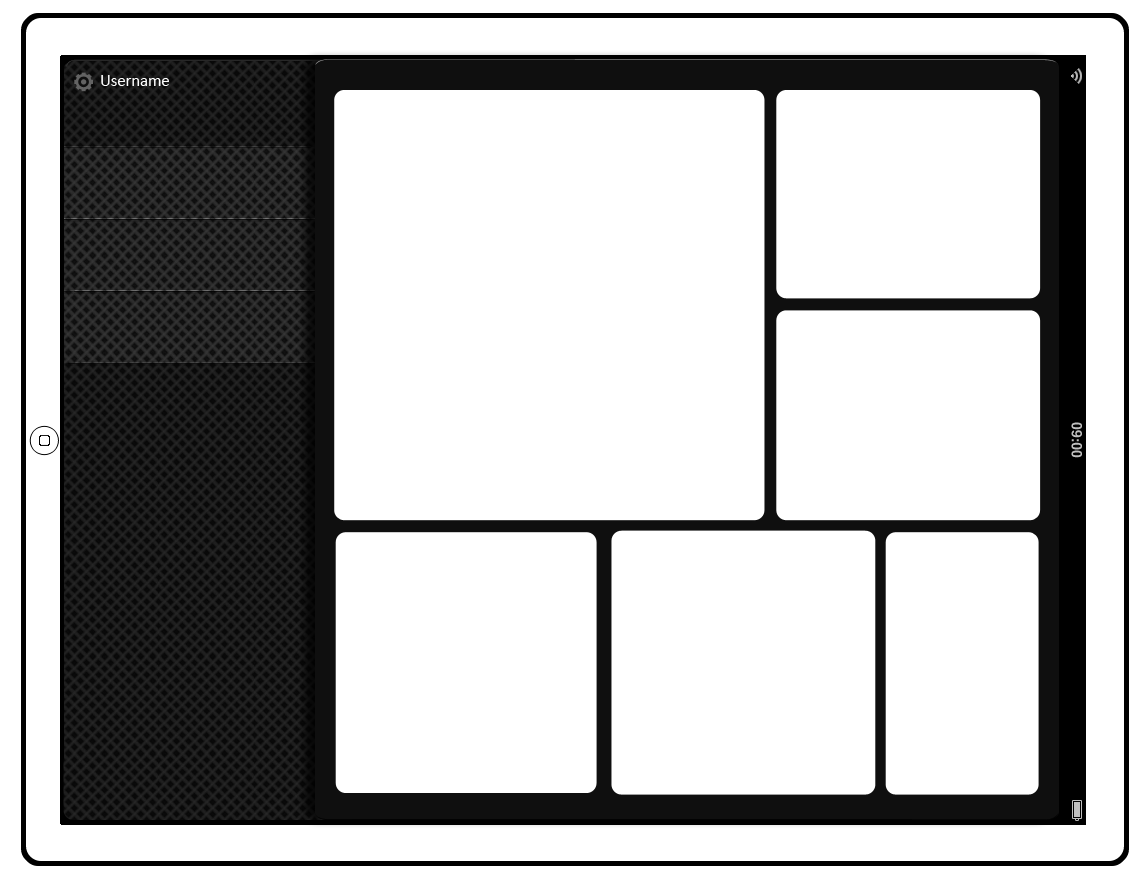
<style>
.page{position:relative;width:1136px;height:880px;background:#ffffff}
.page>*{position:absolute;margin:0}
.t1{font:16.7px "Calibri";color:#ffffff}
</style>
<div class="page">
<p class="t1" style="left:101px;top:75px;width:68px;height:11px">Username</p>
</div>
